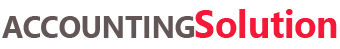
<style>
.page{position:relative;width:340px;height:49px;background:#ffffff}
.page>*{position:absolute;margin:0}
.t1{font:31px "SegoeUI-Bold";color:#625657;scale:0.95 1}
.t2{font:38.5px "SegoeUI-Bold";color:#f61837;scale:0.95 1}
</style>
<div class="page">
<p class="t1" style="left:2px;top:16px;width:193px;height:22px">ACCOUNTING</p>
<p class="t2" style="left:195px;top:9px;width:142px;height:29px">Solution</p>
</div>
